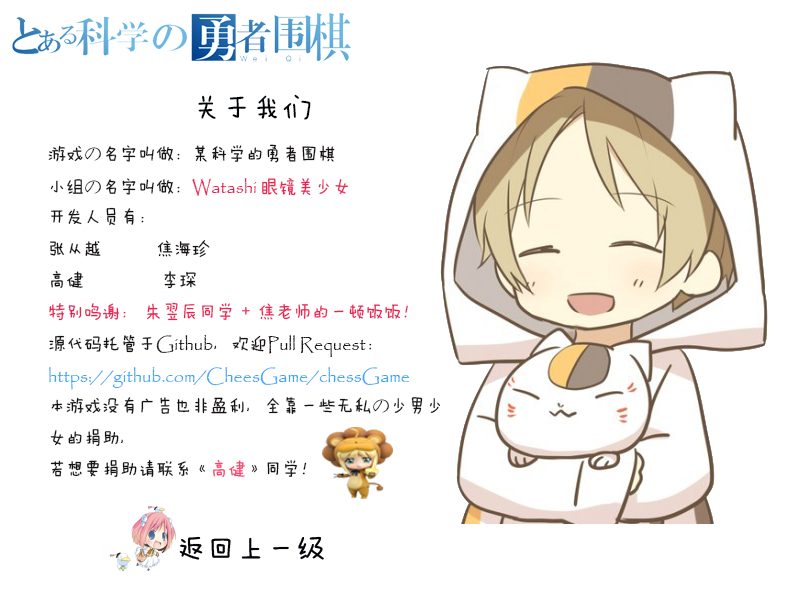
<style>
.page{position:relative;width:800px;height:600px;background:#ffffff}
.page>*{position:absolute;margin:0}
.t1{font:18px "Papyrus-Regular";color:#3ca4fc}
.t2{font:30px "MicrosoftYaHei";color:#000303}
.t3{font:30px "FZMWJW--GB1-0";color:#000406}
.t4{font:18px "FZMWJW--GB1-0";color:#151012}
.t5{font:18px "Papyrus-Regular";color:#e82457}
.t6{font:18px "FZMWJW--GB1-0";color:#e82457}
.t7{font:18px "Papyrus-Regular";color:#151012}
.t8{font:18px "FZMWJW--GB1-0";color:#fb416d}
</style>
<div class="page">
<p class="t1" style="left:48px;top:94px;width:393px;height:384px"><span class="t2">    </span><span class="t3">关于我们<br></span><span class="t4">游戏の名字叫做：某科学的勇者围棋<br>小组の名字叫做：</span><span class="t5">Watashi </span><span class="t6">眼镜美少女<br></span><span class="t4">开发人员有：<br>张从越  焦海珍<br>高健            李琛<br></span><span class="t6">特别鸣谢： 朱翌辰同学 + 焦老师的一顿饭饭！<br></span><span class="t4">源代码托管于</span><span class="t7">Github</span><span class="t4">，欢迎</span><span class="t7">Pull Request</span><span class="t4">：<br></span>https://github.com/CheesGame/chessGame<br><span class="t4">本游戏没有广告也非盈利，全靠一些无私の少男少女的捐助，<br>若想要捐助请联系《</span><span class="t8">高健</span><span class="t4">》同学！</span></p>
</div>
